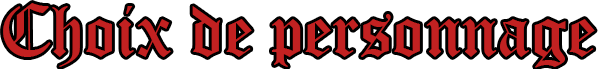
<style>
.page{position:relative;width:598px;height:69px;background:#ffffff}
.page>*{position:absolute;margin:0}
.t1{font:72px "OldEnglishTextMT";color:#c22121}
</style>
<div class="page">
<p class="t1" style="left:3px;top:3px;width:592px;height:65px">Choix de personnage</p>
</div>
